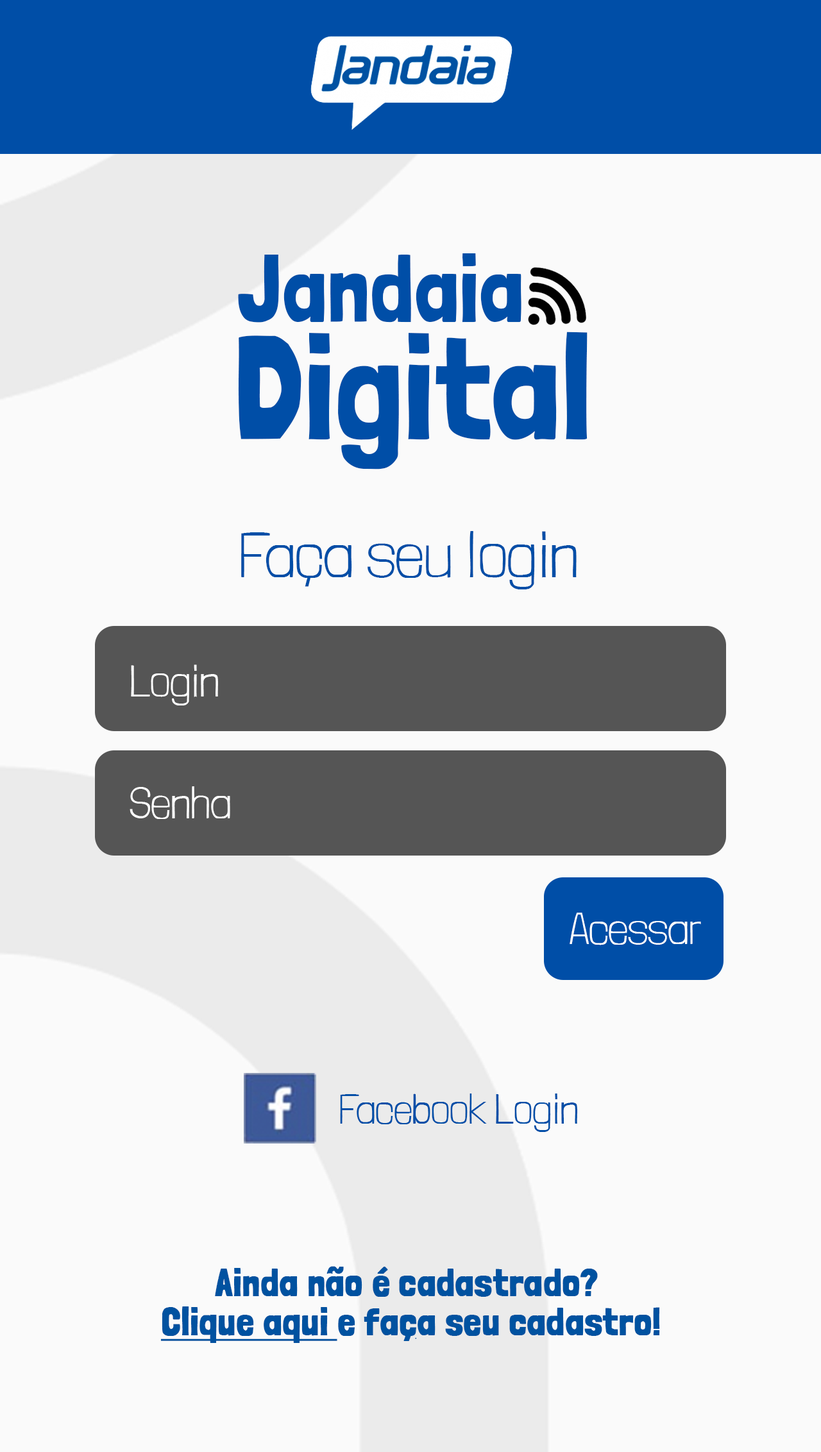
<style>
.page{position:relative;width:821px;height:1452px;background:#fafafa}
.page>*{position:absolute;margin:0}
.t1{font:95px "LondrinaSolid-Regular";color:#004ea7}
.t2{font:147.6px "LondrinaSolid-Regular";color:#004ea7}
.t3{font:64.3px "LondrinaSolid-Thin";color:#004ea7}
.t4{font:44.5px "LondrinaSolid-Thin";color:#ffffff}
.t5{font:41.4px "LondrinaSolid-Thin";color:#004ea7}
.t6{font:38.6px/39px "LondrinaSolid-Regular";color:#0052a0;font-weight:bold}
.t7{font:38.6px/39px "LondrinaSolid-Regular";color:#0052a0;font-weight:bold;text-decoration:underline}
</style>
<div class="page">
<p class="t1" style="left:238px;top:253px;width:284px;height:70px">Jandaia</p>
<p class="t2" style="left:238px;top:332px;width:350px;height:138px">Digital</p>
<p class="t3" style="left:241px;top:531px;width:336px;height:59px">Faça seu login</p>
<p class="t4" style="left:131px;top:665px;width:87px;height:41px">Login</p>
<p class="t4" style="left:130px;top:786px;width:100px;height:33px">Senha</p>
<p class="t4" style="left:570px;top:913px;width:131px;height:33px">Acessar</p>
<p class="t5" style="left:340px;top:1094px;width:237px;height:38px">Facebook Login</p>
<p class="t6" style="left:160px;top:1266px;width:500px;height:77px;text-align:center">Ainda não é cadastrado? <br><span class="t7">Clique aqui </span>e faça seu cadastro!</p>
</div>
